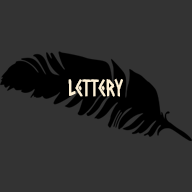
<style>
.page{position:relative;width:192px;height:192px;background:#333333}
.page>*{position:absolute;margin:0}
.t1{font:22.6px "CaesarDressing";color:#fdf0d5;scale:0.8 1}
</style>
<div class="page">
<p class="t1" style="left:68px;top:78px;width:55px;height:19px">lettery</p>
</div>
